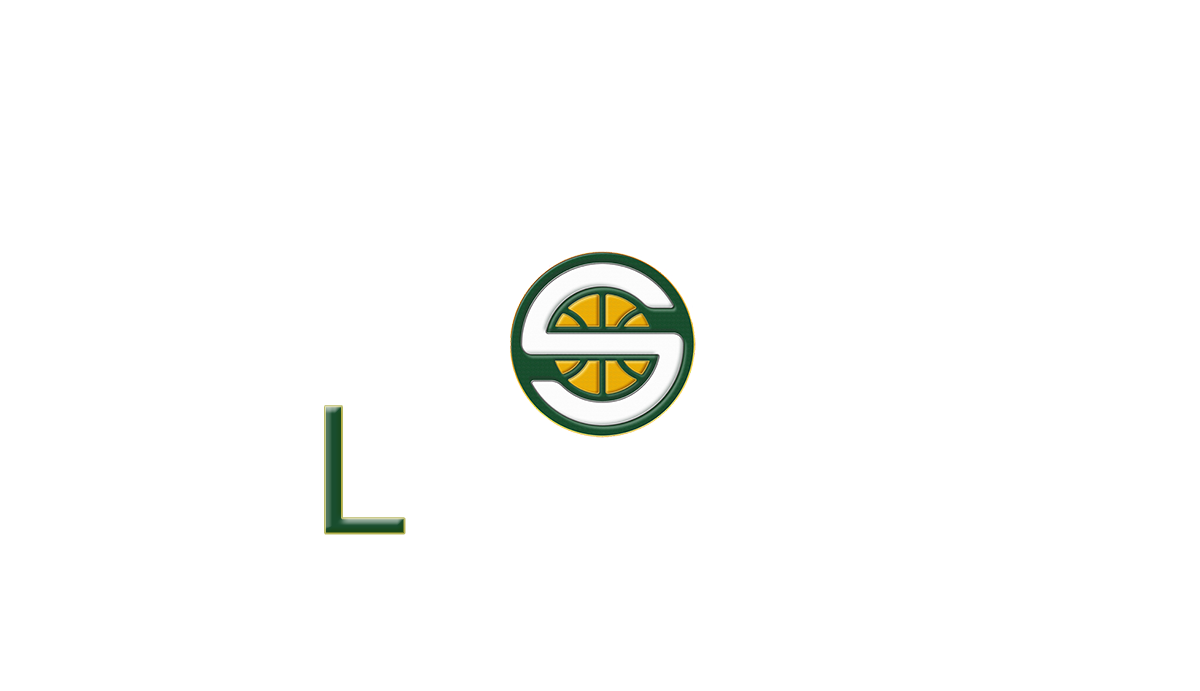
<style>
.page{position:relative;width:1200px;height:691px;background:#ffffff}
.page>*{position:absolute;margin:0}
.t1{font:177.3px "DokChampa"}
</style>
<div class="page">
<p class="t1" style="left:325px;top:406px;width:80px;height:128px">L</p>
</div>
